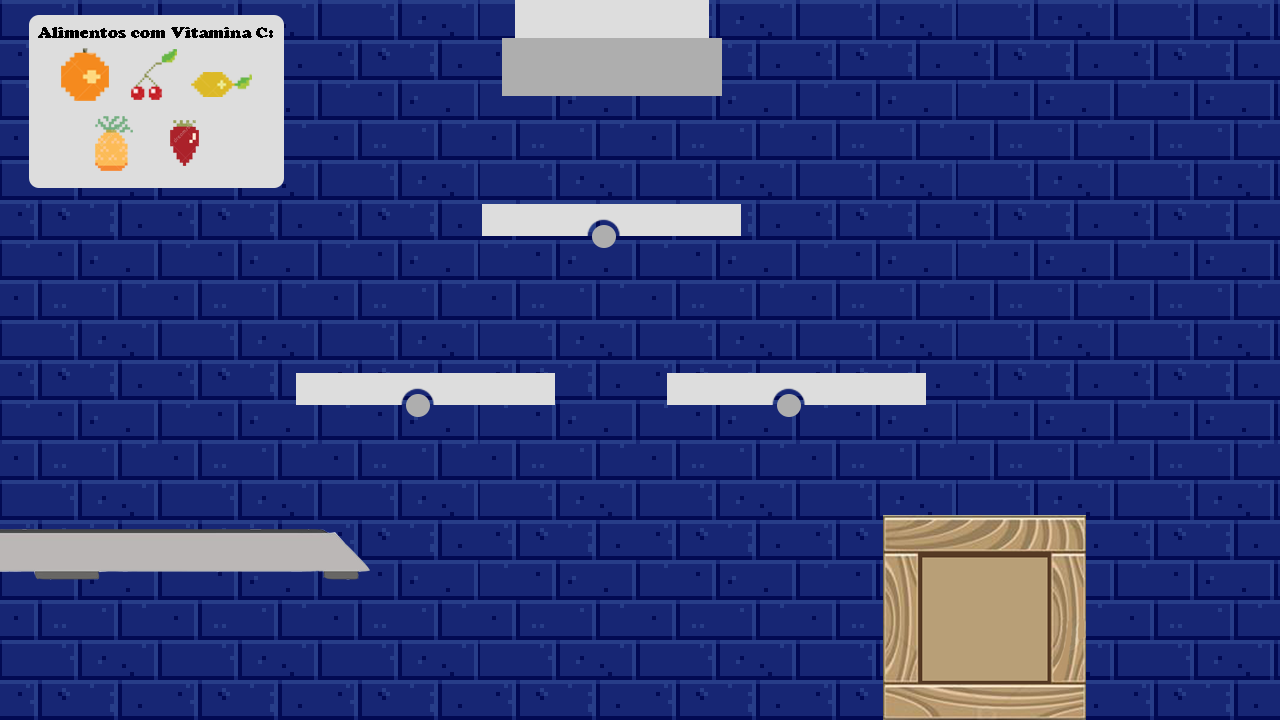
<style>
.page{position:relative;width:1280px;height:720px;background:#172674}
.page>*{position:absolute;margin:0}
.t1{font:15.5px "CooperBlackStd";color:#000000;scale:1.03 1}
</style>
<div class="page">
<p class="t1" style="left:38px;top:27px;width:235px;height:11px">Alimentos com Vitamina C:</p>
</div>
